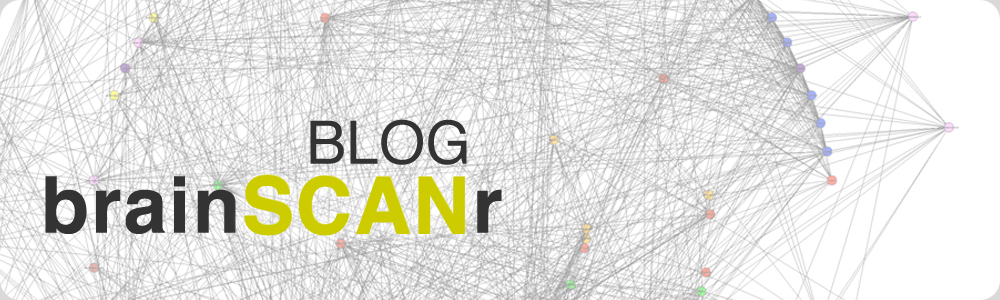
<style>
.page{position:relative;width:1000px;height:300px;background:#ffffff}
.page>*{position:absolute;margin:0}
.t1{font:59.7px "Helvetica";color:#333333;text-transform:uppercase}
.t2{font:78.1px "Helvetica-Bold";color:#333333;font-weight:bold}
.t3{font:78.1px "Helvetica-Bold";color:#cccc00;font-weight:bold}
</style>
<div class="page">
<p class="t1" style="left:310px;top:119px;width:157px;height:46px">Blog</p>
<p class="t2" style="left:45px;top:174px;width:457px;height:61px">brain<span class="t3">SCAN</span>r</p>
<p class="t3" style="left:244px;top:175px;width:221px;height:61px">SCAN</p>
</div>
